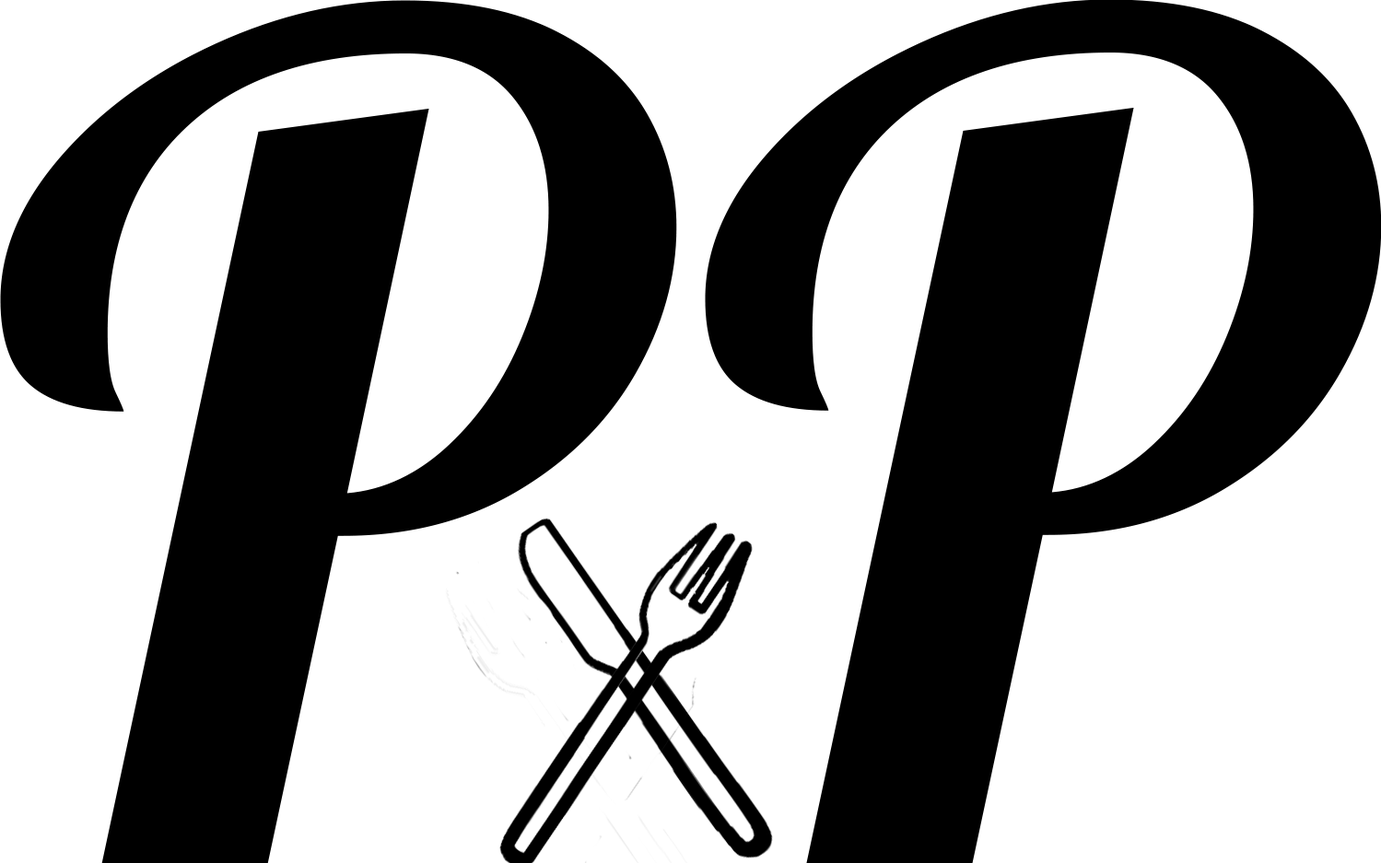
<style>
.page{position:relative;width:1381px;height:863px;background:#ffffff}
.page>*{position:absolute;margin:0}
.t1{font:1151.7px "Lobster-Regular";color:#000000}
</style>
<div class="page">
<p class="t1" style="left:0px;top:0px;width:677px;height:864px">P</p>
<p class="t1" style="left:705px;top:0px;width:677px;height:863px">P</p>
</div>
